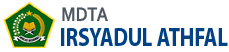
<style>
.page{position:relative;width:229px;height:52px;background:#ffffff}
.page>*{position:absolute;margin:0}
.t1{font:20.6px "Corbel-Bold";color:#4e5761;scale:0.85 1}
.t2{font:25.8px "MyriadPro-Bold";color:#004285;scale:0.8 1}
</style>
<div class="page">
<p class="t1" style="left:62px;top:7px;width:46px;height:15px">MDTA</p>
<p class="t2" style="left:61px;top:28px;width:167px;height:18px">IRSYADUL ATHFAL</p>
</div>
